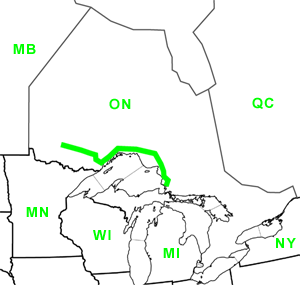
<style>
.page{position:relative;width:300px;height:285px;background:#ffffff}
.page>*{position:absolute;margin:0}
.t1{font:14px "Arial-BoldMT";letter-spacing:0.1em;color:#00ff00}
</style>
<div class="page">
<p class="t1" style="left:13px;top:44px;width:23px;height:10px">MB</p>
<p class="t1" style="left:109px;top:98px;width:22px;height:12px">ON</p>
<p class="t1" style="left:252px;top:97px;width:22px;height:12px">QC</p>
<p class="t1" style="left:26px;top:207px;width:22px;height:10px">MN</p>
<p class="t1" style="left:93px;top:230px;width:18px;height:10px">WI</p>
<p class="t1" style="left:276px;top:238px;width:20px;height:10px">NY</p>
<p class="t1" style="left:163px;top:248px;width:16px;height:10px">MI</p>
</div>
